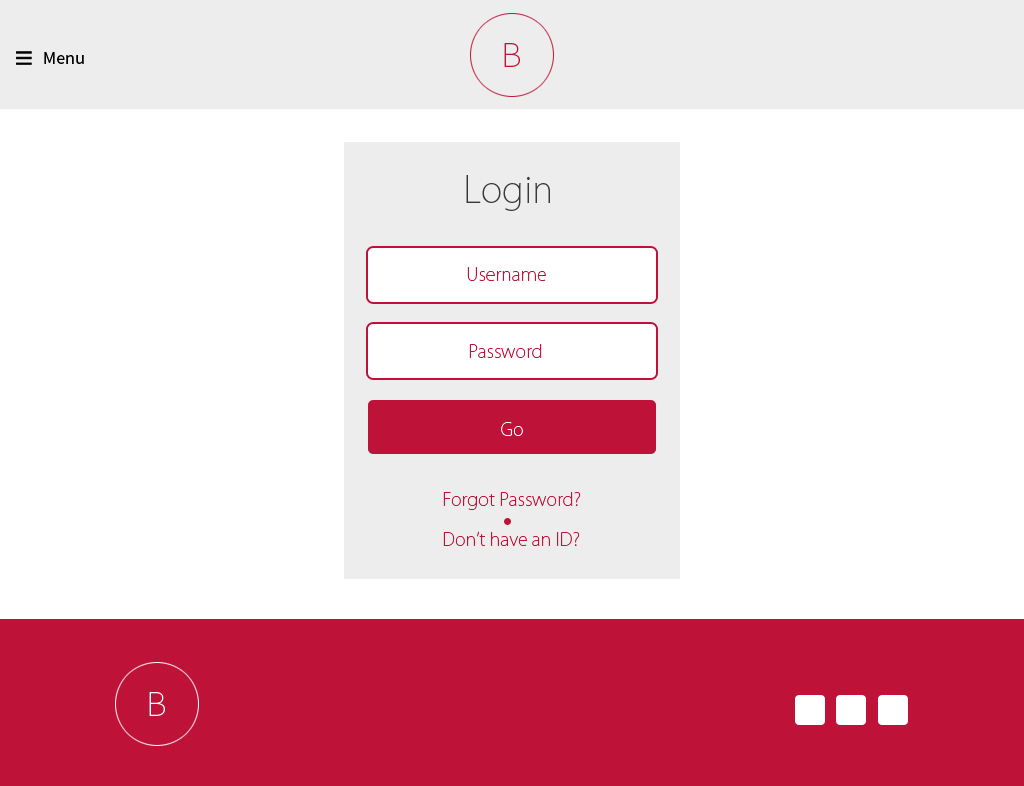
<style>
.page{position:relative;width:1024px;height:786px;background:#ffffff}
.page>*{position:absolute;margin:0}
.t1{font:18px "SourceSansPro-Regular";color:#000000}
.t2{font:36px "SourceSansPro-ExtraLight";color:#bf1238}
.t3{font:36px "KozGoPr6N-ExtraLight";color:#383838}
.t4{font:18px "KozGoPr6N-ExtraLight";color:#bf1238}
.t5{font:18px "KozGoPr6N-ExtraLight";color:#ffffff}
.t6{font:36px "SourceSansPro-ExtraLight";color:#ffffff}
</style>
<div class="page">
<p class="t1" style="left:44px;top:52px;width:40px;height:12px">Menu</p>
<p class="t2" style="left:504px;top:43px;width:16px;height:24px">B</p>
<p class="t3" style="left:466px;top:175px;width:84px;height:36px">Login</p>
<p class="t4" style="left:467px;top:267px;width:79px;height:14px">Username</p>
<p class="t4" style="left:469px;top:344px;width:73px;height:14px">Password</p>
<p class="t5" style="left:501px;top:422px;width:22px;height:14px">Go</p>
<p class="t4" style="left:443px;top:492px;width:138px;height:18px">Forgot Password?</p>
<p class="t4" style="left:443px;top:531px;width:137px;height:15px">Don’t have an ID?</p>
<p class="t6" style="left:149px;top:692px;width:16px;height:24px">B</p>
</div>
